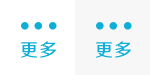
<style>
.page{position:relative;width:150px;height:75px;background:#ffffff}
.page>*{position:absolute;margin:0}
.t1{font:18px "FZZZHUNHJW--GB1-0";letter-spacing:0.075em;color:#0faed6}
</style>
<div class="page">
<p class="t1" style="left:21px;top:41px;width:35px;height:17px">更多</p>
<p class="t1" style="left:96px;top:41px;width:35px;height:17px">更多</p>
</div>
